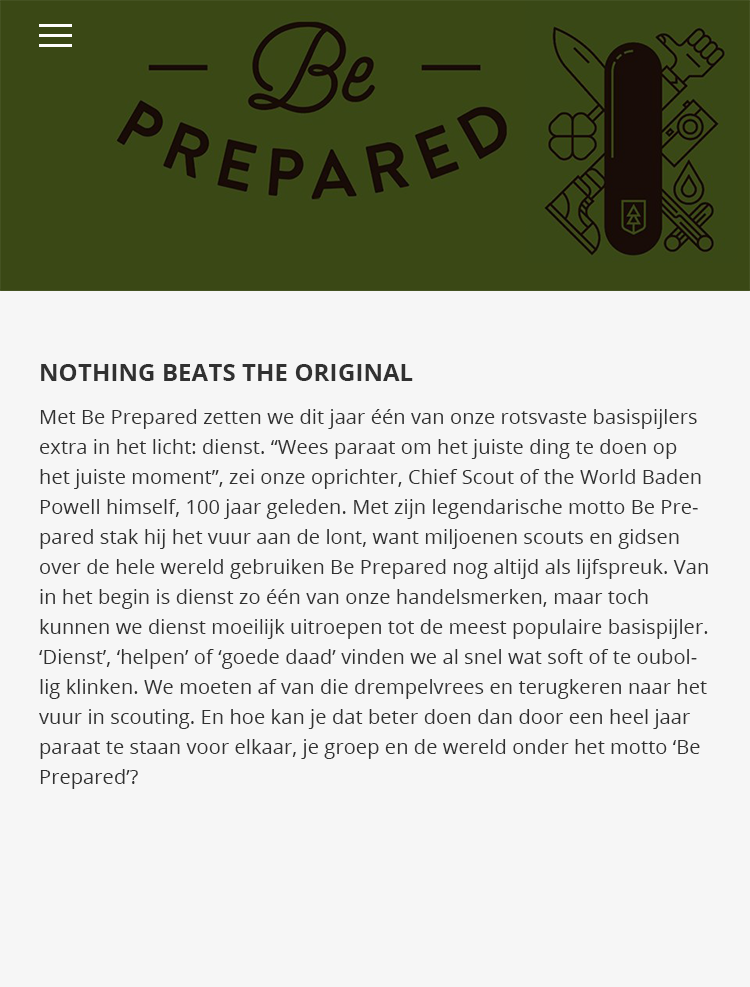
<style>
.page{position:relative;width:750px;height:987px;background:#f6f6f6}
.page>*{position:absolute;margin:0}
.t1{font:20px/30px "OpenSans";letter-spacing:0.005em;color:#313131}
.t2{font:24px/41px "OpenSans-Bold";letter-spacing:0.005em;color:#313131;text-transform:uppercase}
.t3{font:20px/43px "OpenSans";letter-spacing:0.005em;color:#313131}
</style>
<div class="page">
<p class="t1" style="left:39px;top:364px;width:669px;height:425px"><span class="t2">Nothing beats the original<br></span><span class="t3">Met Be Prepared zetten we dit jaar één van onze rotsvaste basispijlers </span>extra in het licht: dienst. “Wees paraat om het juiste ding te doen op het juiste moment”, zei onze oprichter, Chief Scout of the World Baden Powell himself, 100 jaar geleden. Met zijn legendarische motto Be Prepared stak hij het vuur aan de lont, want miljoenen scouts en gidsen over de hele wereld gebruiken Be Prepared nog altijd als lijfspreuk. Van in het begin is dienst zo één van onze handelsmerken, maar toch kunnen we dienst moeilijk uitroepen tot de meest populaire basispijler. ‘Dienst’, ‘helpen’ of ‘goede daad’ vinden we al snel wat soft of te oubollig klinken. We moeten af van die drempelvrees en terugkeren naar het vuur in scouting. En hoe kan je dat beter doen dan door een heel jaar paraat te staan voor elkaar, je groep en de wereld onder het motto ‘Be Prepared’?</p>
</div>
